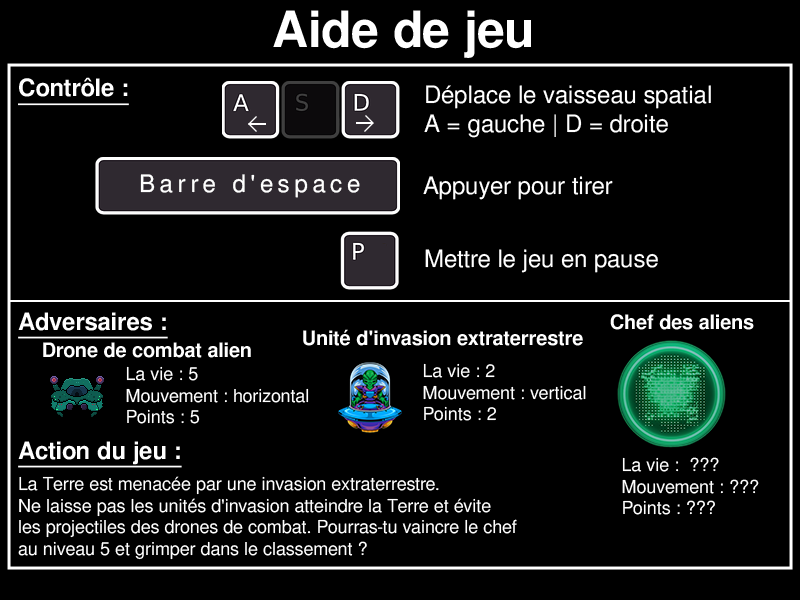
<style>
.page{position:relative;width:800px;height:600px;background:#000000}
.page>*{position:absolute;margin:0}
.t1{font:50px "FreeSansBold";color:#ffffff}
.t2{font:24px "FreeSansBold";color:#ffffff;text-decoration:underline}
.t3{font:24px "FreeSans";color:#ffffff}
.t4{font:24px "FreeSans";letter-spacing:0.2em;color:#ffffff}
.t5{font:20px "FreeSansBold";color:#ffffff}
.t6{font:18px "FreeSans";color:#ffffff}
</style>
<div class="page">
<p class="t1" style="left:273px;top:10px;width:258px;height:48px">Aide de jeu</p>
<p class="t2" style="left:18px;top:77px;width:111px;height:29px">Contrôle :</p>
<p class="t3" style="left:424px;top:85px;width:287px;height:53px">Déplace le vaisseau spatial <br>A = gauche | D = droite</p>
<p class="t4" style="left:140px;top:174px;width:220px;height:24px">Barre d'espace</p>
<p class="t3" style="left:423px;top:176px;width:190px;height:24px">Appuyer pour tirer</p>
<p class="t3" style="left:425px;top:249px;width:233px;height:24px">Mettre le jeu en pause</p>
<p class="t2" style="left:18px;top:312px;width:150px;height:27px">Adversaires :</p>
<p class="t5" style="left:610px;top:314px;width:144px;height:16px">Chef des aliens</p>
<p class="t5" style="left:303px;top:329px;width:280px;height:17px">Unité d'invasion extraterrestre</p>
<p class="t5" style="left:43px;top:342px;width:208px;height:16px">Drone de combat alien</p>
<p class="t6" style="left:126px;top:366px;width:183px;height:58px">La vie : 5<br>Mouvement : horizontal<br>Points : 5</p>
<p class="t6" style="left:423px;top:363px;width:163px;height:58px">La vie : 2<br>Mouvement : vertical<br>Points : 2</p>
<p class="t2" style="left:18px;top:441px;width:164px;height:27px">Action du jeu :</p>
<p class="t6" style="left:622px;top:457px;width:137px;height:58px">La vie :  ???<br>Mouvement : ???<br>Points : ???</p>
<p class="t6" style="left:18px;top:476px;width:499px;height:84px">La Terre est menacée par une invasion extraterrestre. <br>Ne laisse pas les unités d'invasion atteindre la Terre et évite <br>les projectiles des drones de combat. Pourras-tu vaincre le chef <br>au niveau 5 et grimper dans le classement ?</p>
</div>
